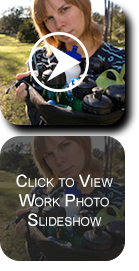
<style>
.page{position:relative;width:139px;height:271px}
.page>*{position:absolute;margin:0}
.t1{font:16.7px/19.4px "ArialMT";color:#ffffff;font-variant:small-caps}
</style>
<div class="page">
<p class="t1" style="left:16px;top:174px;width:97px;height:52px;text-align:center">Click to View Work Photo Slideshow</p>
</div>
